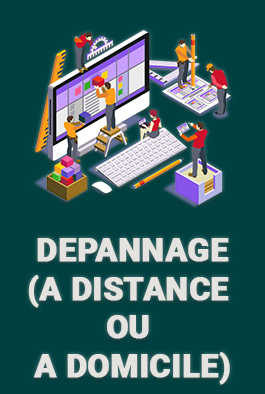
<style>
.page{position:relative;width:265px;height:394px;background:#004040}
.page>*{position:absolute;margin:0}
.t1{font:32px "Roboto-Black";color:#e4e3df;font-weight:bold}
</style>
<div class="page">
<p class="t1" style="left:28px;top:238px;width:202px;height:147px;text-align:center">DEPANNAGE<br>(A DISTANCE <br>OU <br>A DOMICILE)</p>
</div>
